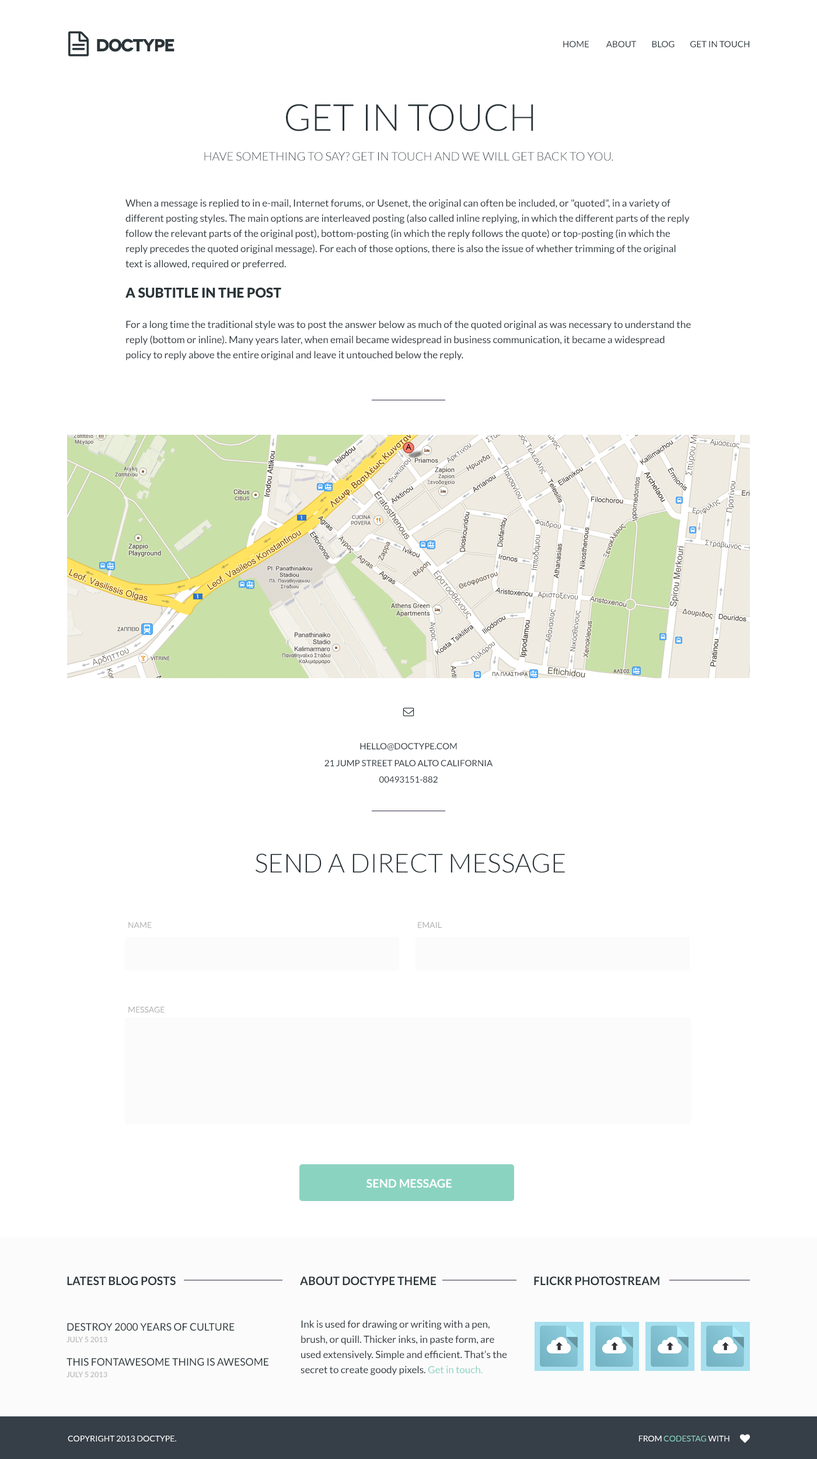
<style>
.page{position:relative;width:817px;height:1459px;background:#ffffff}
.page>*{position:absolute;margin:0}
.t1{font:17.5px "Novecentowide-Bold";letter-spacing:-0.07em;color:#2b353a;text-transform:uppercase}
.t2{font:8.8px "Lato-Regular";color:#2b353a;text-transform:uppercase}
.t3{font:37px "Lato-Light";color:#2b353a;text-transform:uppercase}
.t4{font:11.7px "Lato-Light";color:#2b353a;text-transform:uppercase}
.t5{font:9.9px/15.2px "Lato-Regular";color:#2b353a}
.t6{font:13.4px/15.2px "Lato-Black";color:#2b353a}
.t7{font:26.3px "Lato-Light";color:#2b353a;text-transform:uppercase}
.t8{font:8.2px "Lato-Regular";color:#aeafaf;text-transform:uppercase}
.t9{font:11.7px "Lato-Bold";color:#ffffff;text-transform:uppercase}
.t10{font:11.7px "Lato-Bold";color:#2b353a;text-transform:uppercase}
.t11{font:10.5px/13.9px "Lato-Regular";color:#2b353a;text-transform:uppercase}
.t12{font:7.6px/11.7px "Lato-Bold";color:#c2c2c2;text-transform:uppercase}
.t13{font:9.9px/15.2px "Lato-Regular";color:#8bd3c1}
.t14{font:8.2px "Lato-Regular";color:#ffffff;text-transform:uppercase}
.t15{font:8.2px "Lato-Regular";color:#8bd3c1;text-transform:uppercase}
</style>
<div class="page">
<p class="t1" style="left:97px;top:39px;width:78px;height:13px">DOCTYPE</p>
<p class="t2" style="left:563px;top:41px;width:186px;height:6px">HOME          ABOUT         BLOG         GET IN TOUCH</p>
<p class="t3" style="left:286px;top:104px;width:247px;height:27px">get in touch</p>
<p class="t4" style="left:204px;top:152px;width:409px;height:9px">have something to say? get in touch and we will get back to you.</p>
<p class="t5" style="left:125px;top:199px;width:566px;height:161px">When a message is replied to in e-mail, Internet forums, or Usenet, the original can often be included, or "quoted", in a variety of different posting styles. The main options are interleaved posting (also called inline replying, in which the different parts of the reply follow the relevant parts of the original post), bottom-posting (in which the reply follows the quote) or top-posting (in which the reply precedes the quoted original message). For each of those options, there is also the issue of whether trimming of the original text is allowed, required or preferred.<br><br><span class="t6">A SUBTITLE IN THE POST<br></span><br>For a long time the traditional style was to post the answer below as much of the quoted original as was necessary to understand the reply (bottom or inline). Many years later, when email became widespread in business communication, it became a widespread policy to reply above the entire original and leave it untouched below the reply.</p>
<p class="t7" style="left:256px;top:853px;width:309px;height:20px">send a direct message</p>
<p class="t8" style="left:128px;top:922px;width:24px;height:6px">NAME</p>
<p class="t8" style="left:418px;top:922px;width:24px;height:6px">EMAIL</p>
<p class="t8" style="left:128px;top:1007px;width:37px;height:6px">Message</p>
<p class="t9" style="left:367px;top:1179px;width:85px;height:9px">SEND MESSAGE</p>
<p class="t10" style="left:67px;top:1277px;width:109px;height:9px">LATEST blog POSTS</p>
<p class="t10" style="left:300px;top:1277px;width:136px;height:9px">about doctype theme</p>
<p class="t10" style="left:534px;top:1277px;width:126px;height:9px">flickr photostream</p>
<p class="t11" style="left:67px;top:1323px;width:168px;height:19px">destroy 2000 years of culture<br><span class="t12">july 5 2013</span></p>
<p class="t5" style="left:301px;top:1320px;width:206px;height:55px">Ink is used for drawing or writing with a pen, brush, or quill. Thicker inks, in paste form, are used extensively. Simple and efficient. That’s the secret to create goody pixels.<span class="t13"> Get in touch.</span></p>
<p class="t11" style="left:67px;top:1358px;width:201px;height:20px">this fontawesome thing is awesome   <br><span class="t12">july 5 2013</span></p>
<p class="t14" style="left:68px;top:1436px;width:108px;height:6px">Copyright 2013 Doctype.</p>
<p class="t15" style="left:639px;top:1436px;width:91px;height:6px"><span class="t14">from </span>codestag <span class="t14">with</span></p>
</div>
